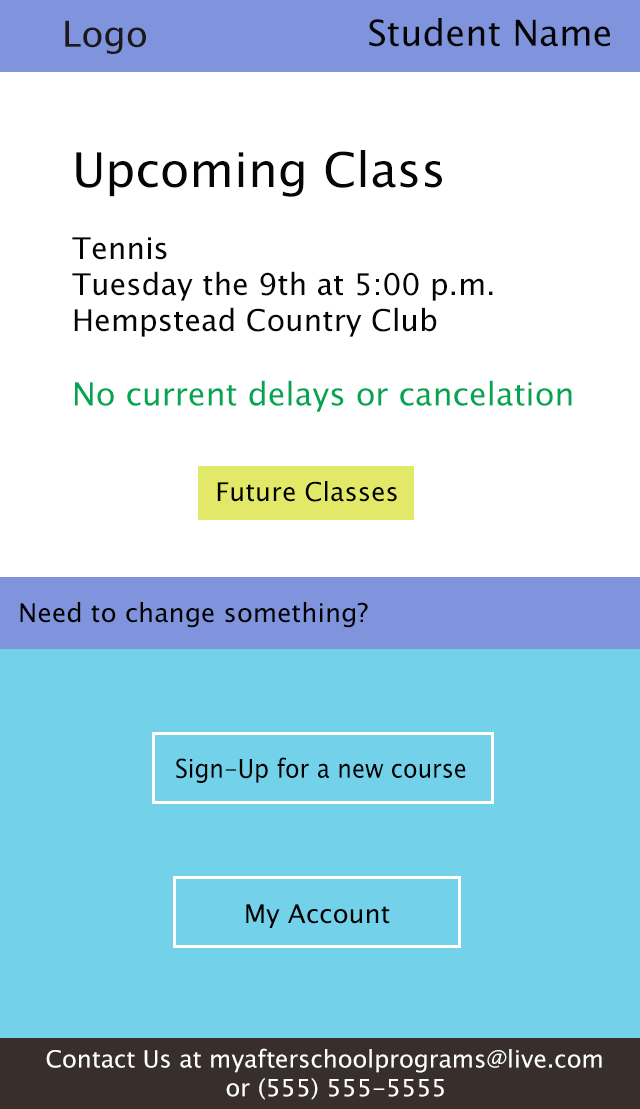
<style>
.page{position:relative;width:640px;height:1109px;background:#ffffff}
.page>*{position:absolute;margin:0}
.t1{font:36px "LucidaSansUnicode";color:#1d1919}
.t2{font:36px "LucidaSansUnicode";color:#060505}
.t3{font:30px "LucidaSansUnicode";color:#060505}
.t4{font:48px "LucidaSansUnicode";color:#060505}
.t5{font:32px "LucidaSansUnicode";color:#00a651}
.t6{font:26px "LucidaSansUnicode";color:#000000}
.t7{font:26px "LucidaSansUnicode";color:#000000;scale:0.91 1}
.t8{font:24px "LucidaSansUnicode";color:#fefefe}
</style>
<div class="page">
<p class="t1" style="left:65px;top:20px;width:81px;height:34px">Logo</p>
<p class="t2" style="left:369px;top:18px;width:241px;height:29px">Student Name</p>
<p class="t3" style="left:72px;top:150px;width:500px;height:262px"><span class="t4">Upcoming Class<br></span><br>Tennis<br>Tuesday the 9th at 5:00 p.m.<br>Hempstead Country Club<br><br><span class="t5">No current delays or cancelation</span></p>
<p class="t6" style="left:217px;top:481px;width:180px;height:21px">Future Classes</p>
<p class="t6" style="left:20px;top:602px;width:348px;height:26px">Need to change something?</p>
<p class="t7" style="left:176px;top:757px;width:290px;height:26px">Sign-Up for a new course</p>
<p class="t6" style="left:246px;top:904px;width:144px;height:24px">My Account</p>
<p class="t8" style="left:46px;top:1048px;width:556px;height:52px">Contact Us at myafterschoolprograms@live.com<br>     or (555) 555-5555</p>
</div>
